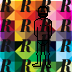
<style>
.page{position:relative;width:72px;height:72px}
.page>*{position:absolute;margin:0}
.t1{font:18px "BodoniBE-BoldCnItalic";color:#131313}
</style>
<div class="page">
<p class="t1" style="left:39px;top:34px;width:12px;height:14px">R</p>
</div>
